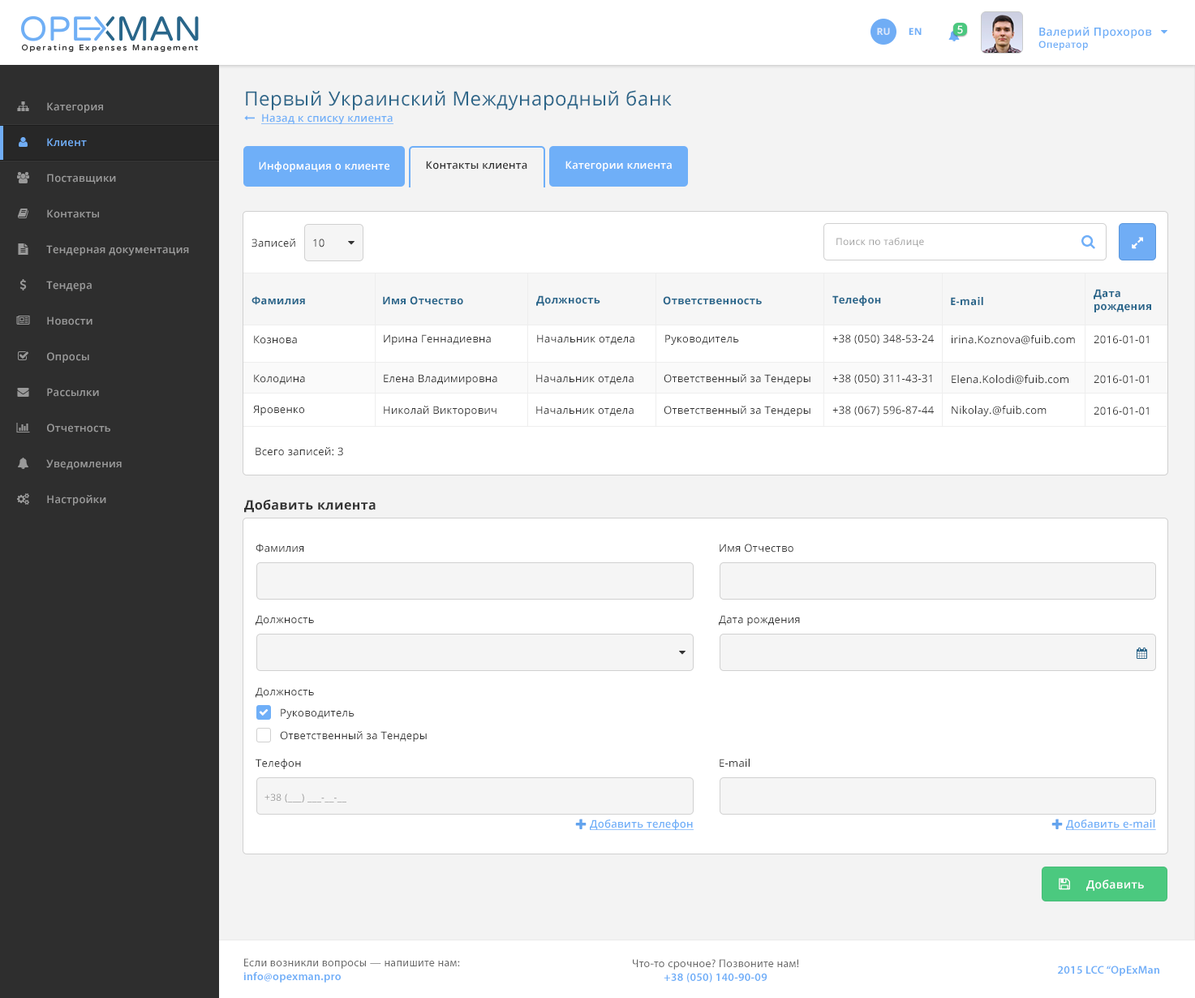
<style>
.page{position:relative;width:1195px;height:998px;background:#ffffff}
.page>*{position:absolute;margin:0}
.t1{font:9.7px "OpenSans-Bold";letter-spacing:0.025em;color:#dbe8fc;text-transform:uppercase}
.t2{font:9.7px "OpenSans-Bold";letter-spacing:0.025em;color:#6faff8;text-transform:uppercase}
.t3{font:10.5px "OpenSans-Semibold";letter-spacing:0.025em;color:#ffffff}
.t4{font:11.3px "OpenSans-Semibold";letter-spacing:0.025em;color:#6eaef7}
.t5{font:9.7px "OpenSans-Semibold";letter-spacing:0.025em;color:#6eaef7}
.t6{font:19.5px "OpenSans";letter-spacing:0.025em;color:#2c6689}
.t7{font:10.5px "OpenSans-Semibold";letter-spacing:0.025em;color:#999999}
.t8{font:10.5px "OpenSans-Semibold";letter-spacing:0.025em;color:#6faff8;text-decoration:underline}
.t9{font:10.5px "OpenSans-Semibold";letter-spacing:0.025em;color:#70adf5}
.t10{font:10.5px "OpenSans-Semibold";letter-spacing:0.025em;color:#333333}
.t11{font:10.5px "OpenSans";letter-spacing:0.025em;color:#333333}
.t12{font:9.7px "OpenSans";letter-spacing:0.025em;color:#999999}
.t13{font:10.5px "OpenSans-Bold";letter-spacing:0.025em;color:#29668b}
.t14{font:13px "OpenSans-Bold";letter-spacing:0.025em;color:#333333}
.t15{font:11.4px "OpenSans-Semibold";letter-spacing:0.025em;color:#ffffff}
.t16{font:11.3px "MyriadPro-Regular";letter-spacing:0.025em;color:#696969}
.t17{font:11.3px "MyriadPro-Semibold";letter-spacing:0.025em;color:#6eaef8}
</style>
<div class="page">
<p class="t1" style="left:877px;top:28px;width:13px;height:7px">Ru</p>
<p class="t2" style="left:909px;top:28px;width:13px;height:7px">EN</p>
<p class="t3" style="left:957px;top:25px;width:6px;height:9px">5</p>
<p class="t4" style="left:1038px;top:27px;width:114px;height:23px">Валерий Прохоров<br><span class="t5">Оператор</span></p>
<p class="t6" style="left:246px;top:90px;width:426px;height:20px">Первый Украинский Международный банк</p>
<p class="t7" style="left:47px;top:102px;width:56px;height:11px">Категория</p>
<p class="t8" style="left:261px;top:114px;width:132px;height:10px">Назад к списку клиента</p>
<p class="t9" style="left:47px;top:138px;width:40px;height:9px">Клиент</p>
<p class="t3" style="left:259px;top:161px;width:130px;height:11px">Информация о клиенте</p>
<p class="t10" style="left:426px;top:161px;width:101px;height:9px">Контакты клиента</p>
<p class="t3" style="left:565px;top:161px;width:107px;height:10px">Категории клиента</p>
<p class="t7" style="left:47px;top:174px;width:69px;height:10px">Поставщики</p>
<p class="t7" style="left:47px;top:209px;width:52px;height:9px">Контакты</p>
<p class="t7" style="left:46px;top:245px;width:143px;height:11px">Тендерная документация</p>
<p class="t11" style="left:251px;top:239px;width:44px;height:8px">Записей</p>
<p class="t11" style="left:313px;top:239px;width:12px;height:8px">10</p>
<p class="t12" style="left:836px;top:238px;width:88px;height:9px">Поиск по таблице</p>
<p class="t7" style="left:46px;top:281px;width:46px;height:10px">Тендера</p>
<p class="t13" style="left:1094px;top:289px;width:57px;height:23px">Дата <br>рождения</p>
<p class="t13" style="left:251px;top:296px;width:54px;height:9px">Фамилия</p>
<p class="t13" style="left:383px;top:296px;width:80px;height:9px">Имя Отчество</p>
<p class="t13" style="left:536px;top:295px;width:64px;height:11px">Должность</p>
<p class="t13" style="left:663px;top:296px;width:99px;height:9px">Ответственность</p>
<p class="t13" style="left:832px;top:295px;width:49px;height:11px">Телефон</p>
<p class="t13" style="left:951px;top:297px;width:32px;height:9px">E-mail</p>
<p class="t7" style="left:47px;top:316px;width:45px;height:9px">Новости</p>
<p class="t11" style="left:254px;top:335px;width:43px;height:9px">Кознова</p>
<p class="t11" style="left:384px;top:334px;width:107px;height:11px">Ирина Геннадиевна</p>
<p class="t11" style="left:537px;top:334px;width:97px;height:11px">Начальник отдела</p>
<p class="t11" style="left:665px;top:334px;width:74px;height:11px">Руководитель</p>
<p class="t11" style="left:832px;top:334px;width:102px;height:10px">+38 (050) 348-53-24</p>
<p class="t11" style="left:952px;top:335px;width:123px;height:10px">irina.Koznova@fuib.com</p>
<p class="t11" style="left:1094px;top:335px;width:55px;height:9px">2016-01-01</p>
<p class="t7" style="left:47px;top:352px;width:42px;height:11px">Опросы</p>
<p class="t11" style="left:254px;top:374px;width:51px;height:11px">Колодина</p>
<p class="t11" style="left:384px;top:374px;width:113px;height:11px">Елена Владимировна</p>
<p class="t11" style="left:536px;top:374px;width:98px;height:11px">Начальник отдела</p>
<p class="t11" style="left:664px;top:374px;width:146px;height:11px">Ответственный за Тендеры</p>
<p class="t11" style="left:832px;top:374px;width:100px;height:10px">+38 (050) 311-43-31</p>
<p class="t11" style="left:952px;top:375px;width:116px;height:10px">Elena.Kolodi@fuib.com</p>
<p class="t11" style="left:1094px;top:375px;width:55px;height:9px">2016-01-01</p>
<p class="t7" style="left:47px;top:388px;width:52px;height:9px">Рассылки</p>
<p class="t11" style="left:253px;top:405px;width:51px;height:10px">Яровенко</p>
<p class="t11" style="left:384px;top:406px;width:112px;height:10px">Николай Викторович</p>
<p class="t11" style="left:536px;top:406px;width:98px;height:10px">Начальник отдела</p>
<p class="t11" style="left:664px;top:406px;width:146px;height:10px">Ответственный за Тендеры</p>
<p class="t11" style="left:832px;top:406px;width:102px;height:9px">+38 (067) 596-87-44</p>
<p class="t11" style="left:952px;top:406px;width:95px;height:10px">Nikolay.@fuib.com</p>
<p class="t11" style="left:1094px;top:406px;width:55px;height:9px">2016-01-01</p>
<p class="t7" style="left:47px;top:423px;width:63px;height:9px">Отчетность</p>
<p class="t11" style="left:256px;top:447px;width:87px;height:9px">Всего записей: 3</p>
<p class="t7" style="left:46px;top:459px;width:76px;height:11px">Уведомления</p>
<p class="t7" style="left:47px;top:495px;width:59px;height:10px">Настройки</p>
<p class="t14" style="left:244px;top:499px;width:132px;height:14px">Добавить клиента</p>
<p class="t11" style="left:256px;top:544px;width:48px;height:8px">Фамилия</p>
<p class="t11" style="left:720px;top:544px;width:73px;height:8px">Имя Отчество</p>
<p class="t11" style="left:256px;top:615px;width:58px;height:10px">Должность</p>
<p class="t11" style="left:719px;top:615px;width:81px;height:10px">Дата рождения</p>
<p class="t11" style="left:256px;top:687px;width:58px;height:11px">Должность</p>
<p class="t11" style="left:281px;top:708px;width:74px;height:11px">Руководитель</p>
<p class="t11" style="left:280px;top:731px;width:147px;height:10px">Ответственный за Тендеры</p>
<p class="t11" style="left:256px;top:759px;width:45px;height:10px">Телефон</p>
<p class="t11" style="left:720px;top:759px;width:30px;height:8px">E-mail</p>
<p class="t12" style="left:264px;top:793px;width:82px;height:9px">+38 (___) ___-__-__</p>
<p class="t8" style="left:590px;top:819px;width:104px;height:11px">Добавить телефон</p>
<p class="t8" style="left:1066px;top:819px;width:90px;height:11px">Добавить e-mail</p>
<p class="t15" style="left:1086px;top:879px;width:58px;height:12px">Добавить</p>
<p class="t16" style="left:243px;top:958px;width:217px;height:24px">Если возникли вопросы — напишите нам:<br><span class="t17">info@opexman.pro</span></p>
<p class="t16" style="left:633px;top:959px;width:166px;height:23px;text-align:center">Что-то срочное? Позвоните нам!<br><span class="t17">+38 (050) 140-90-09</span></p>
<p class="t17" style="left:1058px;top:965px;width:101px;height:11px">2015 LCC “OpExMan</p>
</div>
